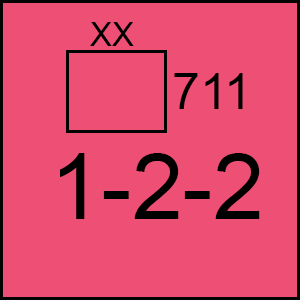
<style>
.page{position:relative;width:300px;height:300px;background:#ee4f74}
.page>*{position:absolute;margin:0}
.t1{font:33.3px "ArialMT";color:#000000}
.t2{font:50px "ArialMT";color:#000000}
.t3{font:91.7px "ArialMT";color:#000000}
</style>
<div class="page">
<p class="t1" style="left:90px;top:22px;width:44px;height:24px">XX</p>
<p class="t2" style="left:174px;top:73px;width:69px;height:36px">711</p>
<p class="t3" style="left:60px;top:153px;width:200px;height:66px">1-2-2</p>
</div>
